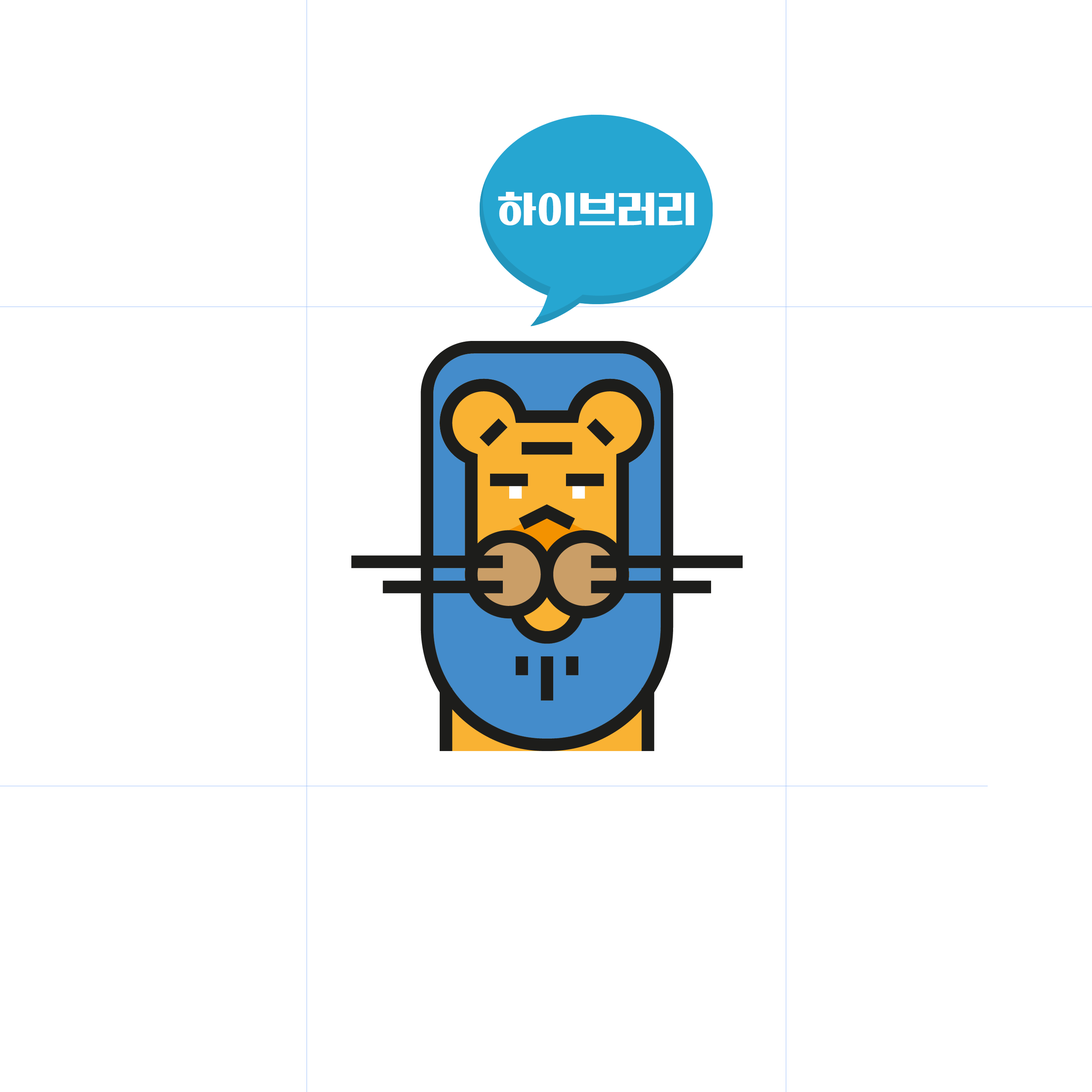
<style>
.page{position:relative;width:1092px;height:1092px;background:#ffffff}
.page>*{position:absolute;margin:0}
.t1{font:40px "OTYukjundabangR";color:#ffffff}
</style>
<div class="page">
<p class="t1" style="left:498px;top:192px;width:196px;height:33px">하이브러리</p>
</div>
